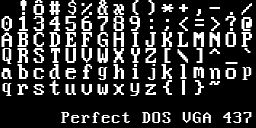
<style>
.page{position:relative;width:256px;height:128px;background:#000000}
.page>*{position:absolute;margin:0}
.t1{font:24px "PerfectDOSVGA437";color:#ffffff}
.t2{font:18px "PerfectDOSVGA437";color:#ffffff}
.t3{font:20px "PerfectDOSVGA437";color:#ffffff}
.t4{font:19px "PerfectDOSVGA437";color:#ffffff}
</style>
<div class="page">
<p class="t1" style="left:20px;top:0px;width:7px;height:15px">!</p>
<p class="t1" style="left:33px;top:0px;width:11px;height:15px">“</p>
<p class="t1" style="left:49px;top:1px;width:11px;height:14px">#</p>
<p class="t2" style="left:68px;top:0px;width:9px;height:15px">$</p>
<p class="t1" style="left:81px;top:3px;width:11px;height:12px">%</p>
<p class="t1" style="left:97px;top:0px;width:11px;height:15px">&amp;</p>
<p class="t1" style="left:113px;top:4px;width:11px;height:11px">‘</p>
<p class="t1" style="left:132px;top:0px;width:7px;height:15px">(</p>
<p class="t1" style="left:148px;top:0px;width:7px;height:15px">)</p>
<p class="t1" style="left:161px;top:4px;width:13px;height:8px">*</p>
<p class="t1" style="left:179px;top:4px;width:9px;height:8px">+</p>
<p class="t1" style="left:241px;top:3px;width:11px;height:12px">/</p>
<p class="t1" style="left:1px;top:16px;width:11px;height:15px">0</p>
<p class="t1" style="left:19px;top:16px;width:9px;height:15px">1</p>
<p class="t1" style="left:33px;top:16px;width:11px;height:15px">3</p>
<p class="t1" style="left:49px;top:16px;width:11px;height:15px">4</p>
<p class="t1" style="left:65px;top:16px;width:11px;height:15px">5</p>
<p class="t1" style="left:81px;top:16px;width:11px;height:15px">6</p>
<p class="t1" style="left:97px;top:16px;width:11px;height:15px">7</p>
<p class="t1" style="left:113px;top:16px;width:11px;height:15px">8</p>
<p class="t1" style="left:129px;top:16px;width:11px;height:15px">9</p>
<p class="t1" style="left:179px;top:17px;width:9px;height:14px">&lt;</p>
<p class="t1" style="left:196px;top:9px;width:5px;height:7px">,</p>
<p class="t1" style="left:209px;top:7px;width:11px;height:2px">-</p>
<p class="t1" style="left:211px;top:17px;width:9px;height:14px">&gt;</p>
<p class="t1" style="left:225px;top:16px;width:11px;height:15px">?</p>
<p class="t1" style="left:241px;top:17px;width:11px;height:14px">@</p>
<p class="t1" style="left:150px;top:19px;width:3px;height:10px">:</p>
<p class="t1" style="left:164px;top:19px;width:5px;height:12px">;</p>
<p class="t1" style="left:195px;top:19px;width:9px;height:7px">=</p>
<p class="t1" style="left:1px;top:32px;width:11px;height:15px">A</p>
<p class="t1" style="left:17px;top:32px;width:11px;height:15px">B</p>
<p class="t1" style="left:33px;top:32px;width:11px;height:15px">C</p>
<p class="t1" style="left:49px;top:32px;width:11px;height:15px">D</p>
<p class="t1" style="left:65px;top:32px;width:11px;height:15px">E</p>
<p class="t1" style="left:81px;top:32px;width:11px;height:15px">F</p>
<p class="t1" style="left:97px;top:32px;width:11px;height:15px">G</p>
<p class="t1" style="left:113px;top:32px;width:11px;height:15px">H</p>
<p class="t1" style="left:132px;top:32px;width:7px;height:15px">I</p>
<p class="t1" style="left:145px;top:32px;width:11px;height:15px">J</p>
<p class="t1" style="left:161px;top:32px;width:11px;height:15px">K</p>
<p class="t1" style="left:177px;top:32px;width:11px;height:15px">L</p>
<p class="t1" style="left:193px;top:32px;width:11px;height:15px">M</p>
<p class="t1" style="left:209px;top:32px;width:11px;height:15px">N</p>
<p class="t1" style="left:225px;top:32px;width:11px;height:15px">O</p>
<p class="t1" style="left:241px;top:32px;width:11px;height:15px">P</p>
<p class="t3" style="left:2px;top:48px;width:10px;height:16px">Q</p>
<p class="t1" style="left:17px;top:48px;width:11px;height:15px">R</p>
<p class="t1" style="left:33px;top:48px;width:11px;height:15px">S</p>
<p class="t1" style="left:51px;top:48px;width:9px;height:15px">T</p>
<p class="t1" style="left:65px;top:48px;width:11px;height:15px">U</p>
<p class="t1" style="left:81px;top:48px;width:11px;height:15px">V</p>
<p class="t1" style="left:97px;top:48px;width:11px;height:15px">W</p>
<p class="t1" style="left:113px;top:48px;width:11px;height:15px">X</p>
<p class="t1" style="left:131px;top:48px;width:9px;height:15px">Y</p>
<p class="t1" style="left:145px;top:48px;width:11px;height:15px">Z</p>
<p class="t1" style="left:164px;top:48px;width:7px;height:15px">[</p>
<p class="t1" style="left:177px;top:49px;width:11px;height:14px">\</p>
<p class="t1" style="left:196px;top:48px;width:7px;height:15px">]</p>
<p class="t1" style="left:209px;top:48px;width:11px;height:6px">^</p>
<p class="t1" style="left:244px;top:48px;width:7px;height:5px">`</p>
<p class="t1" style="left:17px;top:64px;width:11px;height:15px">b</p>
<p class="t1" style="left:49px;top:64px;width:11px;height:15px">d</p>
<p class="t1" style="left:83px;top:64px;width:9px;height:15px">f</p>
<p class="t1" style="left:113px;top:64px;width:11px;height:15px">h</p>
<p class="t1" style="left:132px;top:64px;width:7px;height:15px">i</p>
<p class="t4" style="left:147px;top:64px;width:9px;height:16px">j</p>
<p class="t1" style="left:161px;top:64px;width:11px;height:15px">k</p>
<p class="t1" style="left:180px;top:64px;width:7px;height:15px">l</p>
<p class="t1" style="left:225px;top:62px;width:13px;height:2px">_</p>
<p class="t1" style="left:1px;top:68px;width:11px;height:11px">a</p>
<p class="t1" style="left:33px;top:68px;width:11px;height:11px">c</p>
<p class="t1" style="left:65px;top:68px;width:11px;height:11px">e</p>
<p class="t3" style="left:98px;top:67px;width:10px;height:13px">g</p>
<p class="t1" style="left:193px;top:67px;width:11px;height:11px">m</p>
<p class="t1" style="left:209px;top:68px;width:11px;height:11px">n</p>
<p class="t1" style="left:225px;top:68px;width:11px;height:11px">o</p>
<p class="t3" style="left:242px;top:67px;width:10px;height:13px">p</p>
<p class="t3" style="left:2px;top:83px;width:10px;height:13px">q</p>
<p class="t1" style="left:17px;top:84px;width:11px;height:11px">r</p>
<p class="t1" style="left:33px;top:84px;width:11px;height:11px">s</p>
<p class="t1" style="left:49px;top:80px;width:11px;height:15px">t</p>
<p class="t1" style="left:65px;top:84px;width:11px;height:11px">u</p>
<p class="t1" style="left:81px;top:84px;width:11px;height:11px">v</p>
<p class="t1" style="left:97px;top:84px;width:11px;height:11px">w</p>
<p class="t1" style="left:113px;top:84px;width:11px;height:11px">x</p>
<p class="t3" style="left:130px;top:83px;width:10px;height:13px">y</p>
<p class="t1" style="left:145px;top:84px;width:11px;height:11px">z</p>
<p class="t1" style="left:163px;top:80px;width:9px;height:15px">{</p>
<p class="t1" style="left:195px;top:80px;width:9px;height:15px">}</p>
<p class="t1" style="left:209px;top:81px;width:11px;height:4px">~</p>
<p class="t2" style="left:61px;top:112px;width:191px;height:11px">Perfect DOS VGA 437</p>
</div>
